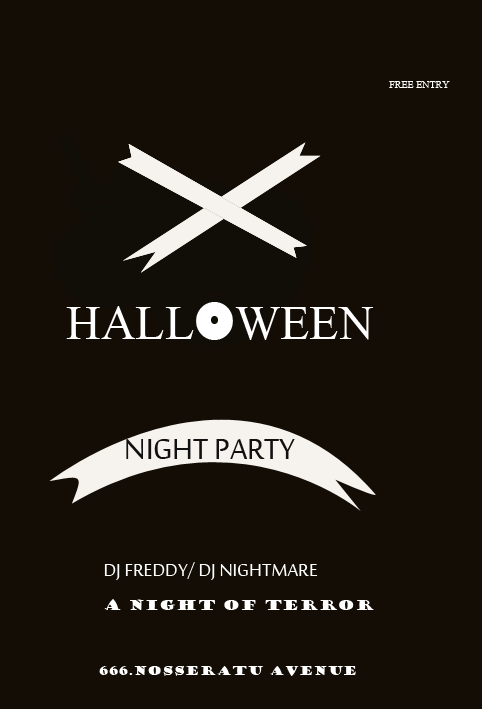
<style>
.page{position:relative;width:482px;height:709px;background:#130d05}
.page>*{position:absolute;margin:0}
.t1{font:10px "IskoolaPota";color:#ffffff}
.t2{font:48px "IskoolaPota";color:#ffffff}
.t3{font:48px "GillSans-UltraBold";color:#ffffff}
.t4{font:38.8px "SakkalMajalla";color:#111111}
.t5{font:24px "SakkalMajalla";color:#ffffff}
.t6{font:14px "GoudyStout";color:#ffffff}
</style>
<div class="page">
<p class="t1" style="left:389px;top:81px;width:61px;height:7px">FREE ENTRY</p>
<p class="t2" style="left:66px;top:302px;width:307px;height:38px">HALL<span class="t3">O</span>WEEN</p>
<p class="t4" style="left:126px;top:439px;width:169px;height:20px">NIGHT PARTY</p>
<p class="t5" style="left:104px;top:562px;width:214px;height:18px">DJ FREDDY/ DJ NIGHTMARE</p>
<p class="t6" style="left:104px;top:599px;width:270px;height:11px">A NIGHT OF TERROR</p>
</div>
